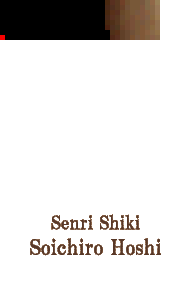
<style>
.page{position:relative;width:192px;height:296px;background:#ffffff}
.page>*{position:absolute;margin:0}
.t1{font:21.3px "HGPMinchoB";color:#583828}
.t2{font:18.7px "HGPMinchoB";color:#583828}
</style>
<div class="page">
<p class="t1" style="left:30px;top:214px;width:131px;height:42px;text-align:center"><span class="t2">Senri Shiki<br></span>Soichiro Hoshi</p>
</div>
